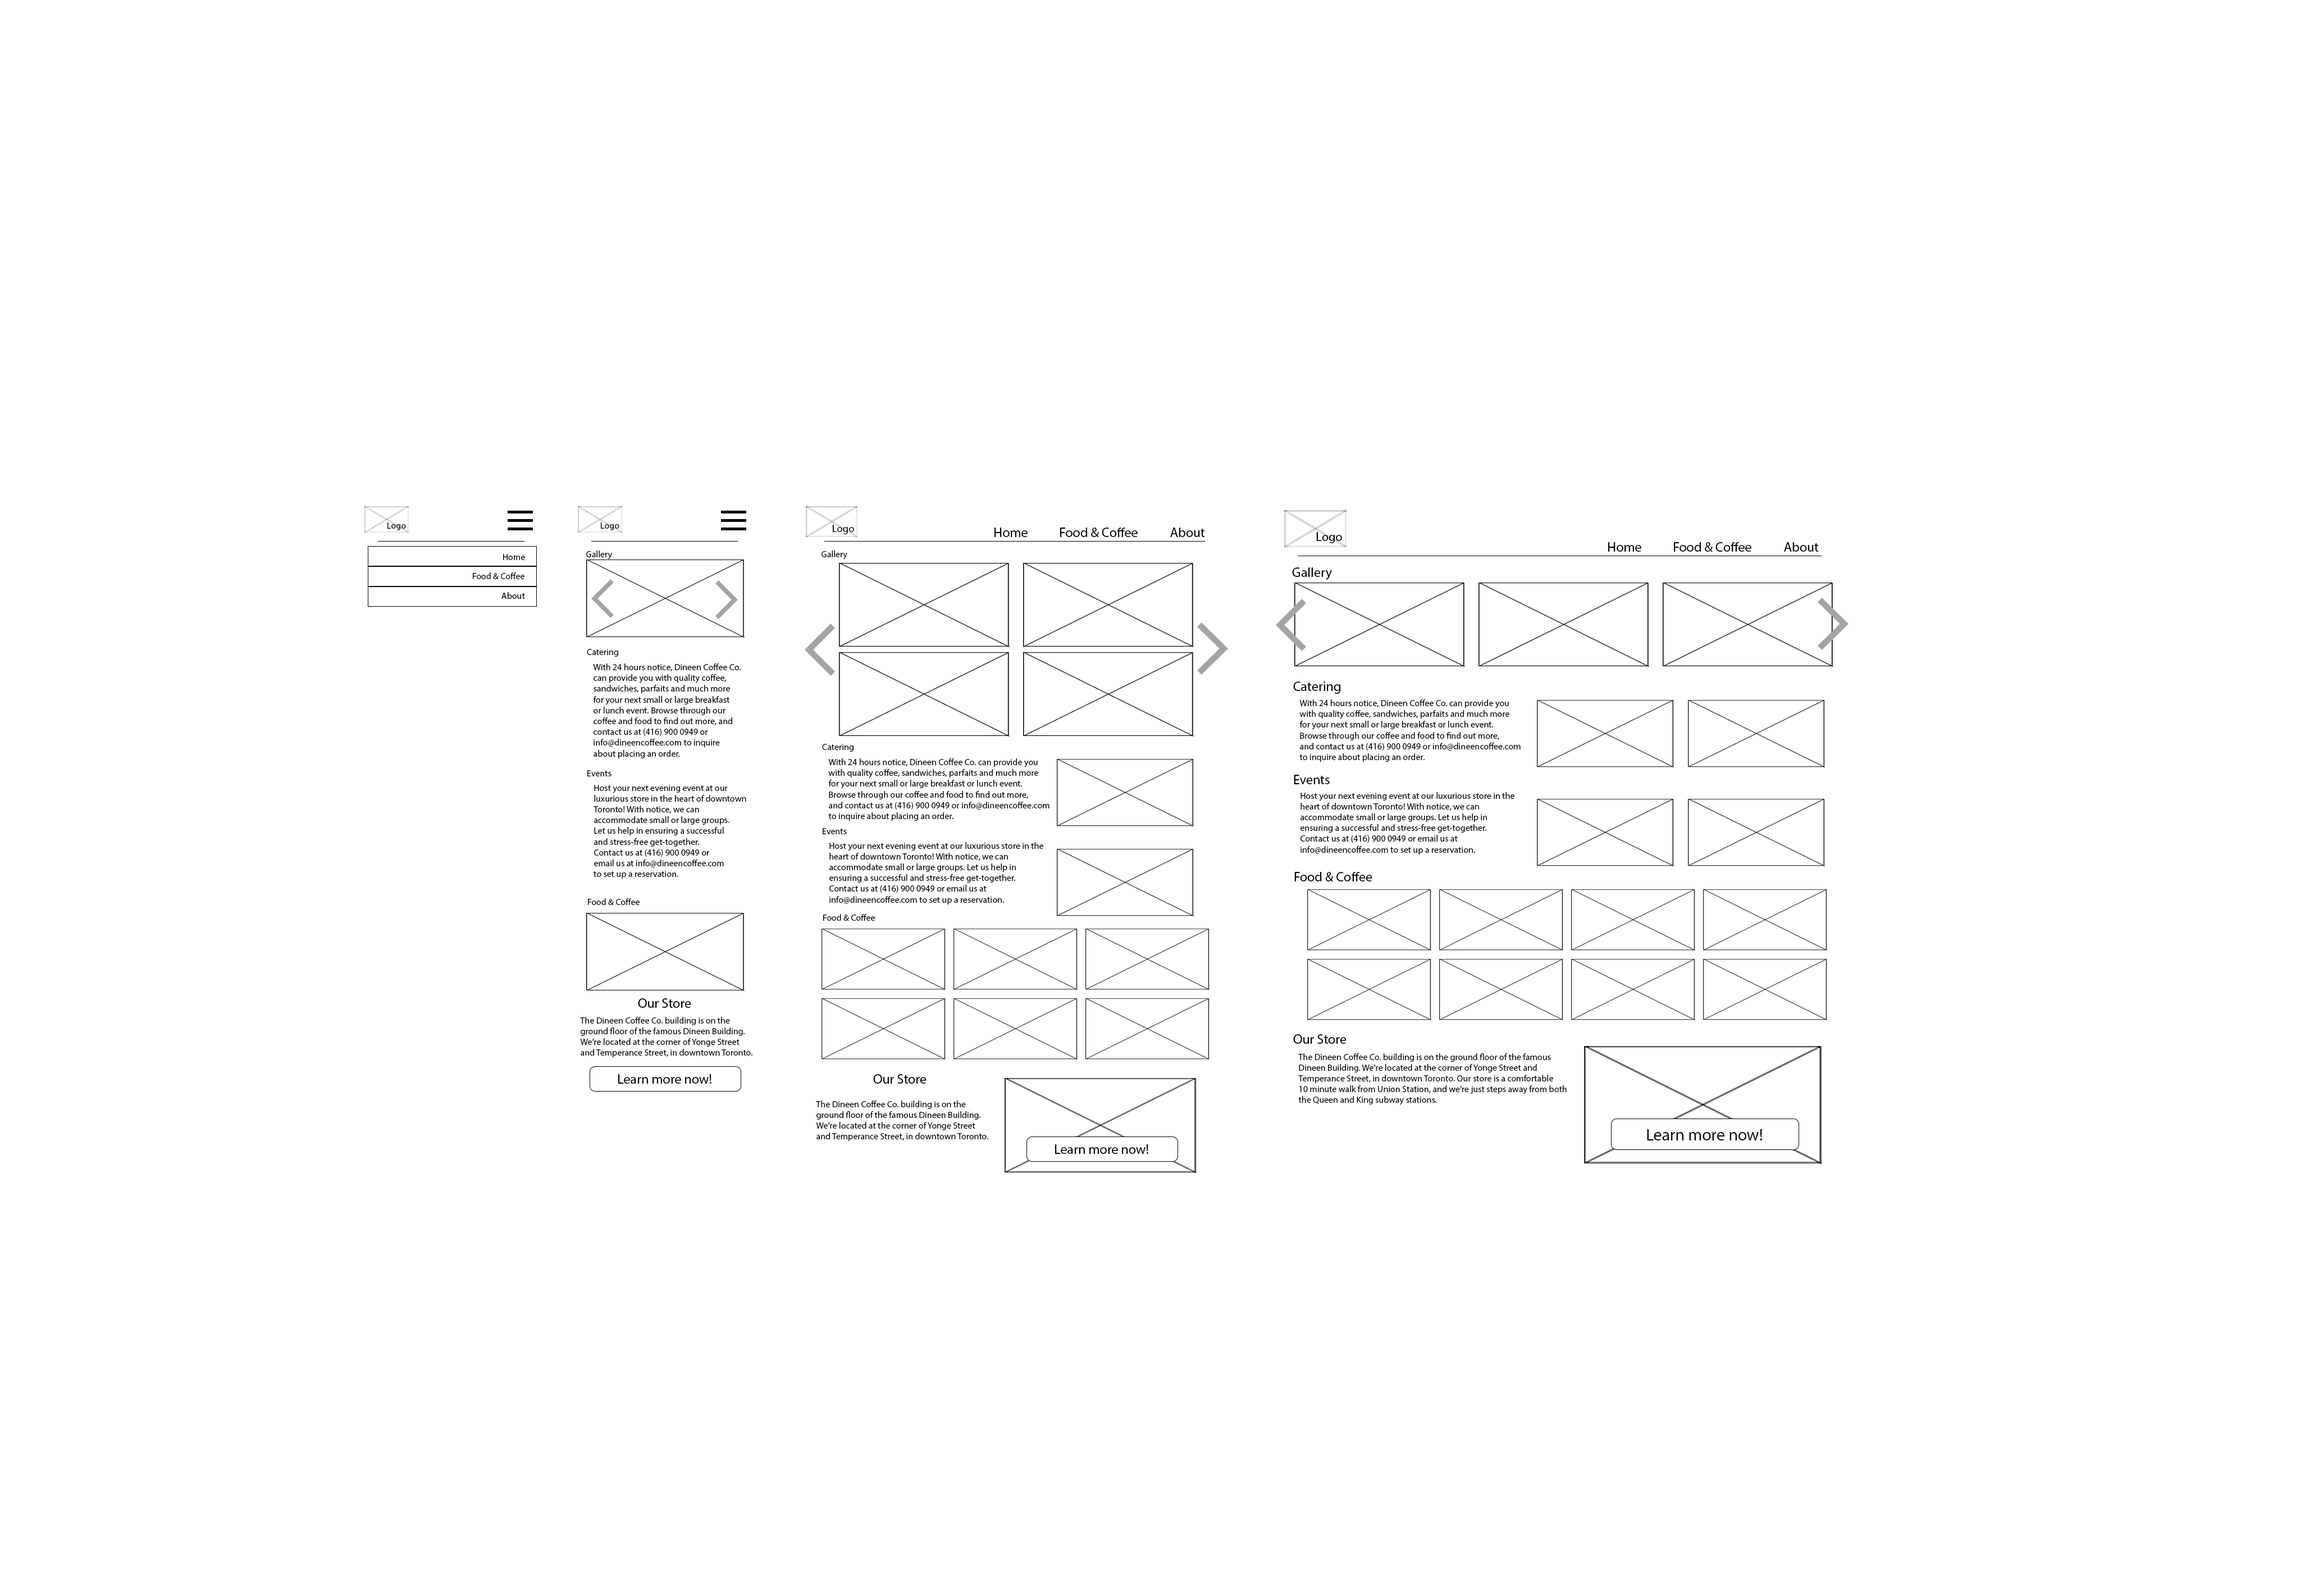
<style>
.page{position:relative;width:2300px;height:1582px;background:#ffffff}
.page>*{position:absolute;margin:0}
.t1{font:9px "MyriadPro-Regular";color:#000000}
.t2{font:10.5px "MyriadPro-Regular";color:#000000}
.t3{font:13.5px "MyriadPro-Regular";color:#000000}
.t4{font:12.6px "MyriadPro-Regular";color:#000000}
.t5{font:16.7px "MyriadPro-Regular";color:#000000}
</style>
<div class="page">
<p class="t1" style="left:388px;top:522px;width:18px;height:8px">Logo</p>
<p class="t1" style="left:601px;top:522px;width:18px;height:8px">Logo</p>
<p class="t2" style="left:833px;top:525px;width:21px;height:9px">Logo</p>
<p class="t3" style="left:995px;top:527px;width:33px;height:10px">Home</p>
<p class="t3" style="left:1060px;top:527px;width:78px;height:10px">Food &amp; Coffee</p>
<p class="t3" style="left:1170px;top:527px;width:35px;height:10px">About</p>
<p class="t4" style="left:1316px;top:532px;width:26px;height:11px">Logo</p>
<p class="t3" style="left:1608px;top:542px;width:34px;height:10px">Home</p>
<p class="t3" style="left:1674px;top:542px;width:78px;height:10px">Food &amp; Coffee</p>
<p class="t3" style="left:1784px;top:542px;width:35px;height:10px">About</p>
<p class="t1" style="left:503px;top:554px;width:22px;height:6px">Home</p>
<p class="t1" style="left:586px;top:550px;width:26px;height:9px">Gallery</p>
<p class="t1" style="left:822px;top:550px;width:25px;height:9px">Gallery</p>
<p class="t3" style="left:1292px;top:567px;width:40px;height:13px">Gallery</p>
<p class="t1" style="left:473px;top:572px;width:52px;height:7px">Food &amp; Coffee</p>
<p class="t1" style="left:502px;top:592px;width:23px;height:7px">About</p>
<p class="t1" style="left:587px;top:649px;width:31px;height:8px">Catering</p>
<p class="t1" style="left:593px;top:663px;width:148px;height:95px">With 24 hours notice, Dineen Coffee Co. <br>can provide you with quality coffee, <br>sandwiches, parfaits and much more <br>for your next small or large breakfast <br>or lunch event. Browse through our <br>coffee and food to find out more, and <br>contact us at (416) 900 0949 or <br>info@dineencoffee.com to inquire <br>about placing an order.</p>
<p class="t3" style="left:1293px;top:681px;width:48px;height:13px">Catering</p>
<p class="t1" style="left:1300px;top:699px;width:221px;height:63px">With 24 hours notice, Dineen Coffee Co. can provide you <br>with quality coffee, sandwiches, parfaits and much more <br>for your next small or large breakfast or lunch event. <br>Browse through our coffee and food to find out more, <br>and contact us at (416) 900 0949 or info@dineencoffee.com <br>to inquire about placing an order.</p>
<p class="t1" style="left:822px;top:744px;width:32px;height:7px">Catering</p>
<p class="t1" style="left:828px;top:758px;width:222px;height:63px">With 24 hours notice, Dineen Coffee Co. can provide you <br>with quality coffee, sandwiches, parfaits and much more <br>for your next small or large breakfast or lunch event. <br>Browse through our coffee and food to find out more, <br>and contact us at (416) 900 0949 or info@dineencoffee.com <br>to inquire about placing an order.</p>
<p class="t1" style="left:587px;top:770px;width:25px;height:6px">Events</p>
<p class="t1" style="left:594px;top:785px;width:152px;height:93px">Host your next evening event at our <br>luxurious store in the heart of downtown <br>Toronto! With notice, we can <br>accommodate small or large groups. <br>Let us help in ensuring a successful <br>and stress-free get-together. <br>Contact us at (416) 900 0949 or <br>email us at info@dineencoffee.com <br>to set up a reservation.</p>
<p class="t3" style="left:1294px;top:774px;width:36px;height:10px">Events</p>
<p class="t1" style="left:1301px;top:792px;width:214px;height:62px">Host your next evening event at our luxurious store in the <br>heart of downtown Toronto! With notice, we can <br>accommodate small or large groups. Let us help in <br>ensuring a successful and stress-free get-together. <br>Contact us at (416) 900 0949 or email us at <br>info@dineencoffee.com to set up a reservation.</p>
<p class="t1" style="left:823px;top:828px;width:24px;height:6px">Events</p>
<p class="t1" style="left:830px;top:842px;width:213px;height:62px">Host your next evening event at our luxurious store in the <br>heart of downtown Toronto! With notice, we can <br>accommodate small or large groups. Let us help in <br>ensuring a successful and stress-free get-together. <br>Contact us at (416) 900 0949 or email us at <br>info@dineencoffee.com to set up a reservation.</p>
<p class="t3" style="left:1295px;top:872px;width:78px;height:9px">Food &amp; Coffee</p>
<p class="t1" style="left:588px;top:898px;width:52px;height:7px">Food &amp; Coffee</p>
<p class="t1" style="left:823px;top:914px;width:52px;height:6px">Food &amp; Coffee</p>
<p class="t3" style="left:638px;top:998px;width:53px;height:10px">Our Store</p>
<p class="t1" style="left:580px;top:1017px;width:173px;height:40px">The Dineen Coffee Co. building is on the <br>ground floor of the famous Dineen Building. <br>We're located at the corner of Yonge Street <br>and Temperance Street, in downtown Toronto.</p>
<p class="t3" style="left:1293px;top:1034px;width:54px;height:9px">Our Store</p>
<p class="t1" style="left:1298px;top:1053px;width:269px;height:52px">The Dineen Coffee Co. building is on the ground floor of the famous <br>Dineen Building. We're located at the corner of Yonge Street and <br>Temperance Street, in downtown Toronto. Our store is a comfortable <br>10 minute walk from Union Station, and we're just steps away from both <br>the Queen and King subway stations.</p>
<p class="t3" style="left:618px;top:1074px;width:94px;height:9px">Learn more now!</p>
<p class="t3" style="left:873px;top:1074px;width:54px;height:9px">Our Store</p>
<p class="t1" style="left:816px;top:1100px;width:172px;height:41px">The Dineen Coffee Co. building is on the <br>ground floor of the famous Dineen Building. <br>We're located at the corner of Yonge Street <br>and Temperance Street, in downtown Toronto.</p>
<p class="t5" style="left:1647px;top:1129px;width:115px;height:11px">Learn more now!</p>
<p class="t3" style="left:1055px;top:1144px;width:94px;height:10px">Learn more now!</p>
</div>
